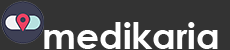
<style>
.page{position:relative;width:230px;height:50px;background:#333333}
.page>*{position:absolute;margin:0}
.t1{font:36px "CenturyGothic-Bold";color:#ffffff}
</style>
<div class="page">
<p class="t1" style="left:44px;top:22px;width:174px;height:27px">medikaria</p>
</div>
